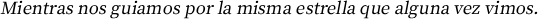
<style>
.page{position:relative;width:543px;height:20px;background:#ffffff}
.page>*{position:absolute;margin:0}
.t1{font:20px "OfficialFateFont-Medium";color:#000000;font-style:italic}
</style>
<div class="page">
<p class="t1" style="left:0px;top:0px;width:538px;height:19px">Mientras nos guiamos por la misma estrella que alguna vez vimos.</p>
</div>
